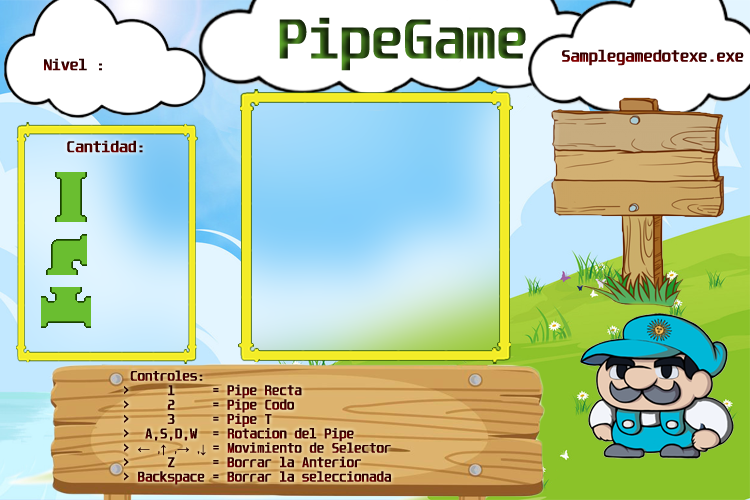
<style>
.page{position:relative;width:750px;height:500px}
.page>*{position:absolute;margin:0}
.t1{font:48px "Unispace-Bold";scale:1.07 1}
.t2{font:14px "Unispace-Bold";scale:1.07 1}
.t3{font:13.5px "Unispace-Bold";scale:1.07 1}
.t4{font:12px "Unispace-Bold"}
.t5{font:12px "TimesNewRomanPSMT"}
.t6{font:12px "UnicaOne-Regular"}
</style>
<div class="page">
<p class="t1" style="left:279px;top:17px;width:247px;height:54px">PipeGame</p>
<p class="t2" style="left:562px;top:49px;width:182px;height:17px">Samplegamedotexe.exe</p>
<p class="t3" style="left:44px;top:58px;width:58px;height:13px">Nivel :</p>
<p class="t3" style="left:67px;top:140px;width:76px;height:13px">Cantidad:</p>
<p class="t4" style="left:124px;top:370px;width:267px;height:115px">Controles:                       <br>&gt;     1     = Pipe Recta<br>&gt;     2     = Pipe Codo<br>&gt;     3     = Pipe T<br>&gt;  A,S,D,W  = Rotacion del Pipe<br>&gt; <span class="t5">← </span><span class="t6">,</span><span class="t5">↑ </span><span class="t6">,</span><span class="t5">→ </span><span class="t6">,</span><span class="t5">↓  </span>= Movimiento de Selector<br>&gt;     Z     = Borrar la Anterior<br>&gt; Backspace = Borrar la seleccionada<br>&gt; P= Salir del juego</p>
</div>
